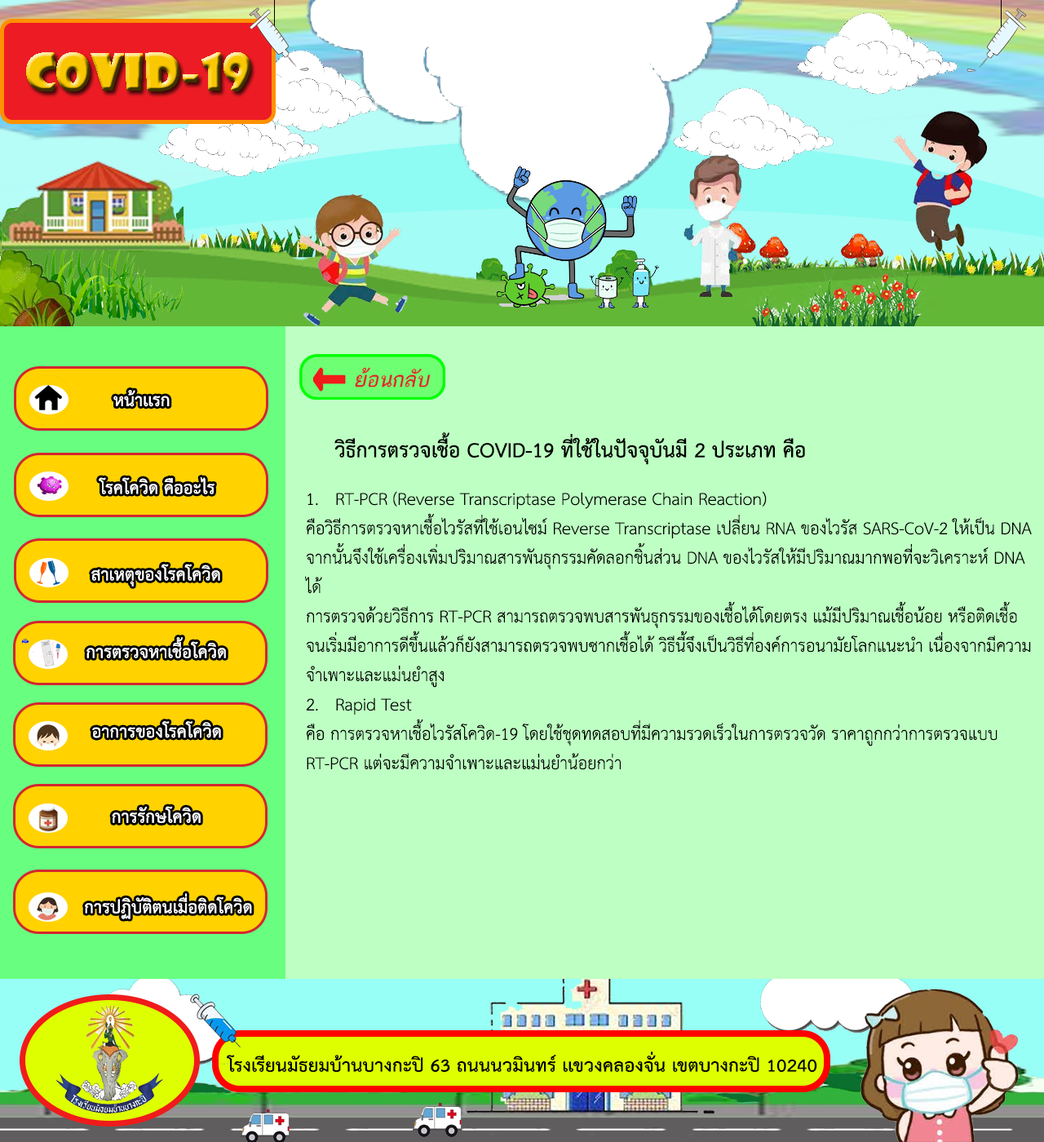
<style>
.page{position:relative;width:1044px;height:1142px;background:#beffc3}
.page>*{position:absolute;margin:0}
.t1{font:24.5px "THSarabunPSK-Bold";color:#ffffff}
.t2{font:29.4px "THSarabunPSK-Bold";color:#000000}
.t3{font:24.5px "THSarabunPSK";color:#000000}
</style>
<div class="page">
<p class="t1" style="left:113px;top:390px;width:57px;height:17px">หน้าเเรก</p>
<p class="t2" style="left:334px;top:432px;width:471px;height:33px">วิธีการตรวจเชื้อ COVID-19 ที่ใช้ในปัจจุบันมี 2 ประเภท คือ</p>
<p class="t1" style="left:99px;top:477px;width:116px;height:17px">โรคโควิด คืออะไร</p>
<p class="t3" style="left:305px;top:491px;width:727px;height:279px">1. RT-PCR (Reverse Transcriptase Polymerase Chain Reaction)<br>คือวิธีการตรวจหาเชื้อไวรัสที่ใช้เอนไซม์ Reverse Transcriptase เปลี่ยน RNA ของไวรัส SARS-CoV-2 ให้เป็น DNA<br>จากนั้นจึงใช้เครื่องเพิ่มปริมาณสารพันธุกรรมคัดลอกชิ้นส่วน DNA ของไวรัสให้มีปริมาณมากพอที่จะวิเคราะห์ DNA <br>ได้<br>การตรวจด้วยวิธีการ RT-PCR สามารถตรวจพบสารพันธุกรรมของเชื้อได้โดยตรง แม้มีปริมาณเชื้อน้อย หรือติดเชื้อ<br>จนเริ่มมีอาการดีขึ้นแล้วก็ยังสามารถตรวจพบซากเชื้อได้ วิธีนี้จึงเป็นวิธีที่องค์การอนามัยโลกแนะนำ เนื่องจากมีความ<br>จำเพาะและแม่นยำสูง<br>2. Rapid Test<br>คือ การตรวจหาเชื้อไวรัสโควิด-19 โดยใช้ชุดทดสอบที่มีความรวดเร็วในการตรวจวัด ราคาถูกกว่าการตรวจแบบ<br>RT-PCR แต่จะมีความจำเพาะและแม่นยำน้อยกว่า</p>
<p class="t1" style="left:91px;top:564px;width:129px;height:23px">สาเหตุของโรคโควิด</p>
<p class="t1" style="left:86px;top:637px;width:140px;height:21px">การตรวจหาเชื้อโควิด</p>
<p class="t1" style="left:92px;top:721px;width:129px;height:17px">อาการของโรคโควิด</p>
<p class="t1" style="left:112px;top:806px;width:89px;height:17px">การรักษโควิด</p>
<p class="t1" style="left:85px;top:893px;width:167px;height:26px">การปฏิบัติตนเมื่อติดโควิด</p>
</div>
